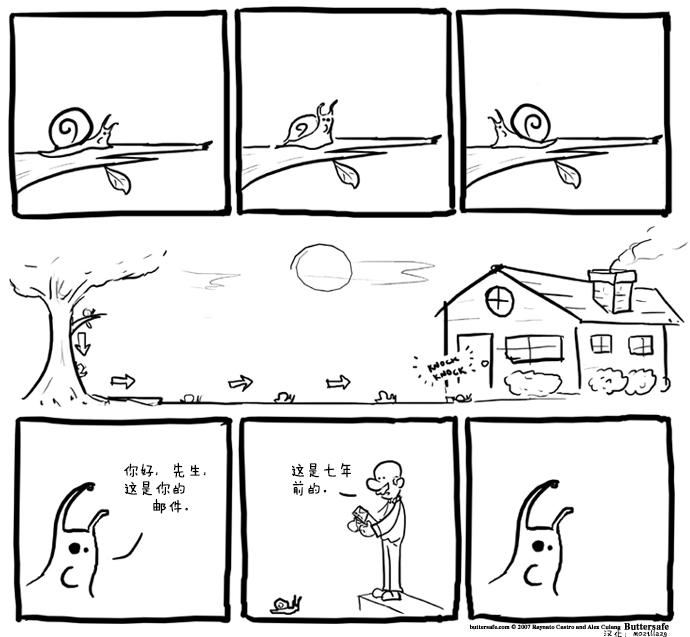
<style>
.page{position:relative;width:690px;height:637px;background:#ffffff}
.page>*{position:absolute;margin:0}
.t1{font:16px/18px "FZMWJW--GB1-0";color:#000000}
.t2{font:10px "FZMWJW--GB1-0";color:#000000}
</style>
<div class="page">
<p class="t1" style="left:124px;top:462px;width:82px;height:52px">你好，先生，<br>这是你的<br>     邮件。</p>
<p class="t1" style="left:292px;top:463px;width:59px;height:33px">这是七年<br>前的。</p>
<p class="t2" style="left:604px;top:629px;width:63px;height:9px">汉化：mozillazg</p>
</div>
